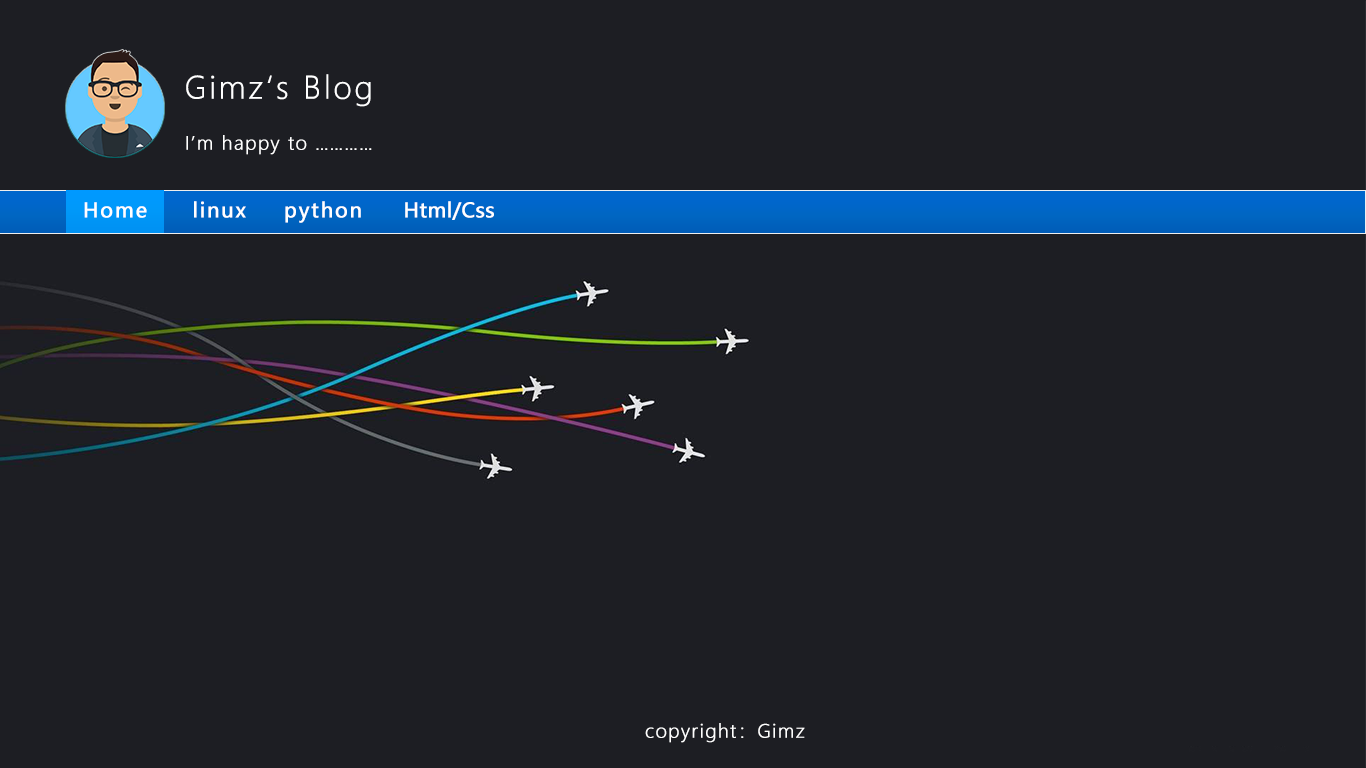
<style>
.page{position:relative;width:1366px;height:768px;background:#1d1e23}
.page>*{position:absolute;margin:0}
.t1{font:30px "MicrosoftYaHeiLight";letter-spacing:0.07em;color:#ffffff;font-weight:bold}
.t2{font:18px "MicrosoftYaHeiLight";letter-spacing:0.07em;color:#ffffff;font-weight:bold}
.t3{font:20px "MicrosoftYaHei";letter-spacing:0.07em;color:#ffffff;font-weight:bold}
.t4{font:20px "MicrosoftYaHei";color:#ffffff;font-weight:bold}
</style>
<div class="page">
<p class="t1" style="left:186px;top:74px;width:185px;height:33px">Gimz‘s Blog</p>
<p class="t2" style="left:186px;top:135px;width:186px;height:20px">I’m happy to …………</p>
<p class="t3" style="left:84px;top:202px;width:63px;height:16px">Home</p>
<p class="t3" style="left:194px;top:201px;width:52px;height:17px">linux</p>
<p class="t3" style="left:285px;top:201px;width:76px;height:22px">python</p>
<p class="t4" style="left:405px;top:201px;width:89px;height:19px">Html/Css</p>
<p class="t2" style="left:645px;top:723px;width:160px;height:20px">copyright：Gimz</p>
</div>
